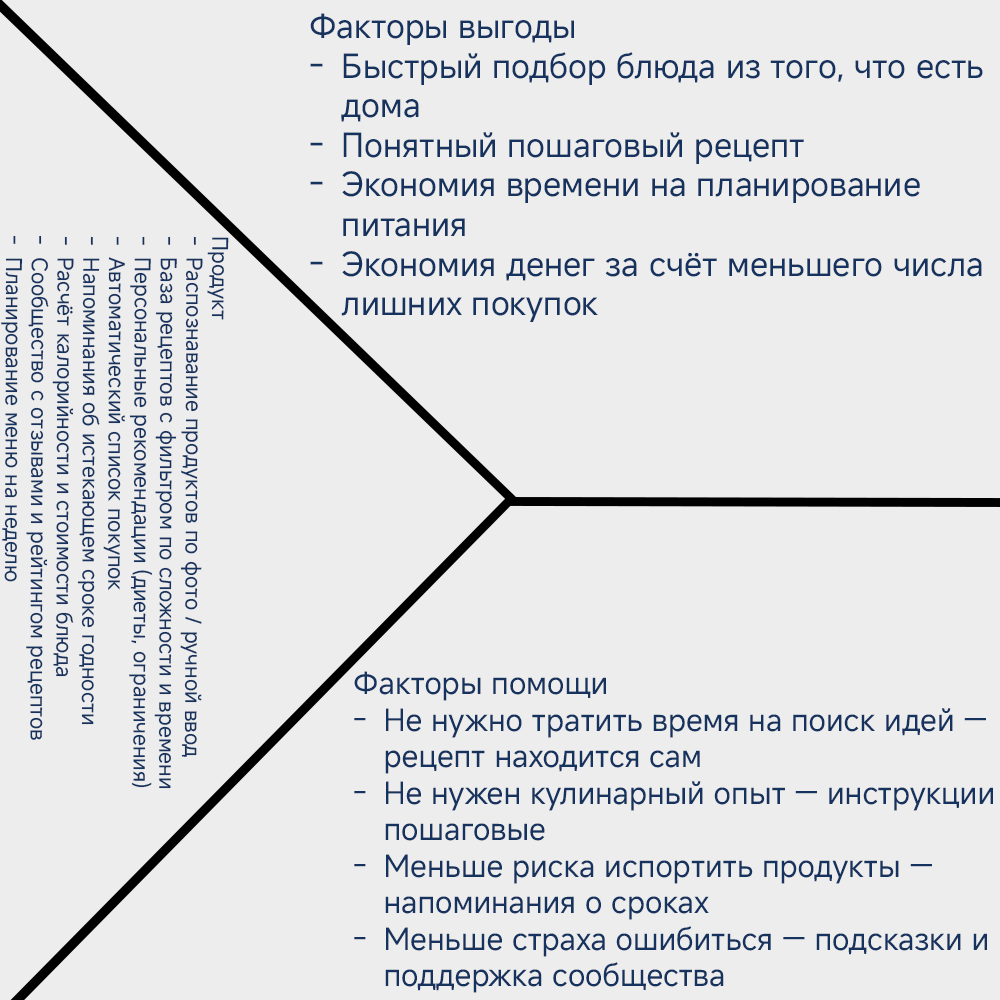
<style>
.page{position:relative;width:1000px;height:1000px;background:#ededed}
.page>*{position:absolute;margin:0}
.t1{font:33px "MiSansLatin-Regular";color:#16335f}
.t2{font:21.5px "MiSansLatin-Regular";color:#16335f}
.t3{font:30.4px "MiSansLatin-Regular";color:#16335f}
</style>
<div class="page">
<p class="t1" style="left:310px;top:13px;width:673px;height:309px">Факторы выгоды <br>Быстрый подбор блюда из того, что есть <br>дома<br>Понятный пошаговый рецепт<br>Экономия времени на планирование <br>питания<br>Экономия денег за счёт меньшего числа <br>лишних покупок</p>
<p class="t2" style="left:1px;top:235px;width:228px;height:554px;rotate:90deg">Продукт<br>Распознавание продуктов по фото / ручной ввод<br>База рецептов с фильтром по сложности и времени<br>Персональные рекомендации (диеты, ограничения)<br>Автоматический список покупок<br>Напоминания об истекающем сроке годности<br>Расчёт калорийности и стоимости блюда<br>Сообщество с отзывами и рейтингом рецептов<br>Планирование меню на неделю</p>
<p class="t3" style="left:354px;top:671px;width:639px;height:322px">Факторы помощи<br>Не нужно тратить время на поиск идей —<br>рецепт находится сам<br>Не нужен кулинарный опыт — инструкции<br>пошаговые<br>Меньше риска испортить продукты —<br>напоминания о сроках<br>Меньше страха ошибиться — подсказки и<br>поддержка сообщества</p>
</div>
